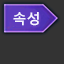
<style>
.page{position:relative;width:64px;height:64px;background:#333333}
.page>*{position:absolute;margin:0}
.t1{font:14px "MalgunGothicBold";color:#f7f4ff}
</style>
<div class="page">
<p class="t1" style="left:13px;top:12px;width:26px;height:14px">속성</p>
</div>
